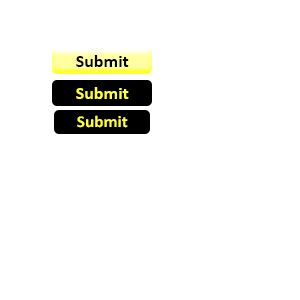
<style>
.page{position:relative;width:300px;height:300px;background:#ffffff}
.page>*{position:absolute;margin:0}
.t1{font:18px "Calibri-Bold";color:#000000}
.t2{font:18px "Calibri-Bold";color:#ffff32}
.t3{font:16.6px "Calibri-Bold";color:#ffff32;scale:1.04 1}
</style>
<div class="page">
<p class="t1" style="left:76px;top:55px;width:53px;height:12px">Submit</p>
<p class="t2" style="left:76px;top:87px;width:53px;height:12px">Submit</p>
<p class="t3" style="left:77px;top:115px;width:51px;height:13px">Submit</p>
</div>
